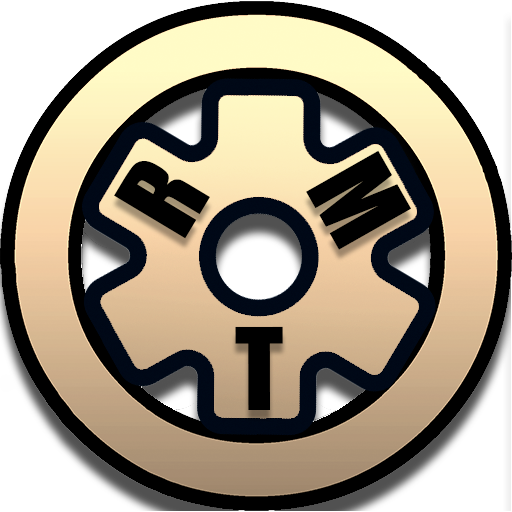
<style>
.page{position:relative;width:512px;height:512px}
.page>*{position:absolute;margin:0}
.t1{font:105px "Impact";color:#000000}
</style>
<div class="page">
<p class="t1" style="left:306px;top:150px;width:105px;height:100px;rotate:60deg">M</p>
<p class="t1" style="left:114px;top:161px;width:96px;height:78px;rotate:-59deg">R</p>
<p class="t1" style="left:235px;top:326px;width:48px;height:84px">T</p>
</div>
